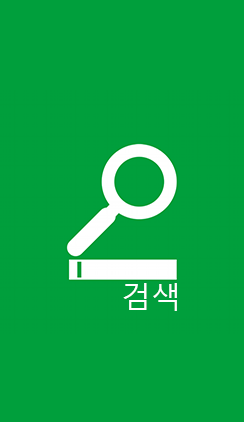
<style>
.page{position:relative;width:244px;height:422px;background:#009f3c}
.page>*{position:absolute;margin:0}
.t1{font:30px "MalgunGothicRegular";color:#ffffff}
</style>
<div class="page">
<p class="t1" style="left:123px;top:283px;width:54px;height:28px">검색</p>
</div>
